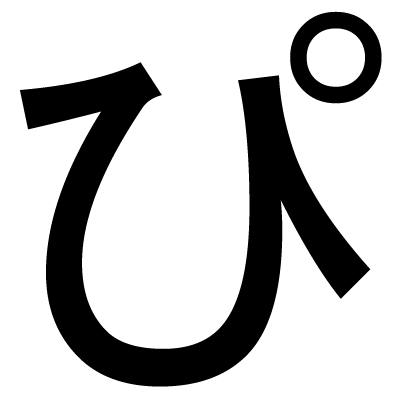
<style>
.page{position:relative;width:400px;height:400px;background:#ffffff}
.page>*{position:absolute;margin:0}
.t1{font:416.7px "MS-PGothic";color:#000000}
</style>
<div class="page">
<p class="t1" style="left:20px;top:11px;width:362px;height:376px">ぴ</p>
</div>
